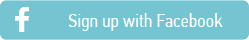
<style>
.page{position:relative;width:249px;height:40px;background:#75c4d1}
.page>*{position:absolute;margin:0}
.t1{font:19.3px "PFDinTextCondPro-Regular";color:#ffffff}
</style>
<div class="page">
<p class="t1" style="left:68px;top:13px;width:155px;height:18px">Sign up with Facebook</p>
</div>
